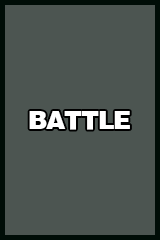
<style>
.page{position:relative;width:160px;height:240px;background:#4c5551}
.page>*{position:absolute;margin:0}
.t1{font:25px "SVN-HelveticaNeueHeavy";letter-spacing:-0.05em;color:#ffffff}
</style>
<div class="page">
<p class="t1" style="left:29px;top:111px;width:101px;height:19px">BATTLE</p>
</div>
